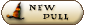
<style>
.page{position:relative;width:85px;height:25px}
.page>*{position:absolute;margin:0}
.t1{font:11px "Lumos";letter-spacing:0.1em;color:#000000}
</style>
<div class="page">
<p class="t1" style="left:29px;top:4px;width:27px;height:7px">new</p>
<p class="t1" style="left:43px;top:14px;width:26px;height:7px">pull</p>
</div>
